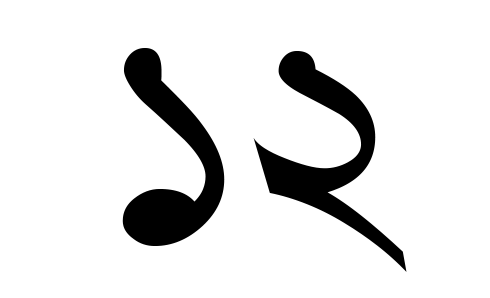
<style>
.page{position:relative;width:490px;height:298px;background:#ffffff}
.page>*{position:absolute;margin:0}
.t1{font:300px "KalpurushANSI";color:#000000}
</style>
<div class="page">
<p class="t1" style="left:122px;top:48px;width:285px;height:224px">12</p>
</div>
